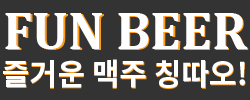
<style>
.page{position:relative;width:250px;height:100px;background:#333333}
.page>*{position:absolute;margin:0}
.t1{font:30px/36px "NotoSansKR-Bold";color:#ffffff}
.t2{font:53px/36px "Cambria-Bold";color:#ffffff}
.t3{font:53px "Cambria-Bold";color:#ffffff}
.t4{font:30px "NotoSansKR-Bold";color:#ffffff}
</style>
<div class="page">
<p class="t1" style="left:3px;top:13px;width:245px;height:75px;text-align:center"><span class="t2">FUN BEER<br></span>즐거운 맥주 칭따오!</p>
<p class="t3" style="left:7px;top:14px;width:242px;height:36px">FUN BEER</p>
<p class="t4" style="left:4px;top:60px;width:242px;height:29px">즐거운 맥주 칭따오!</p>
</div>
